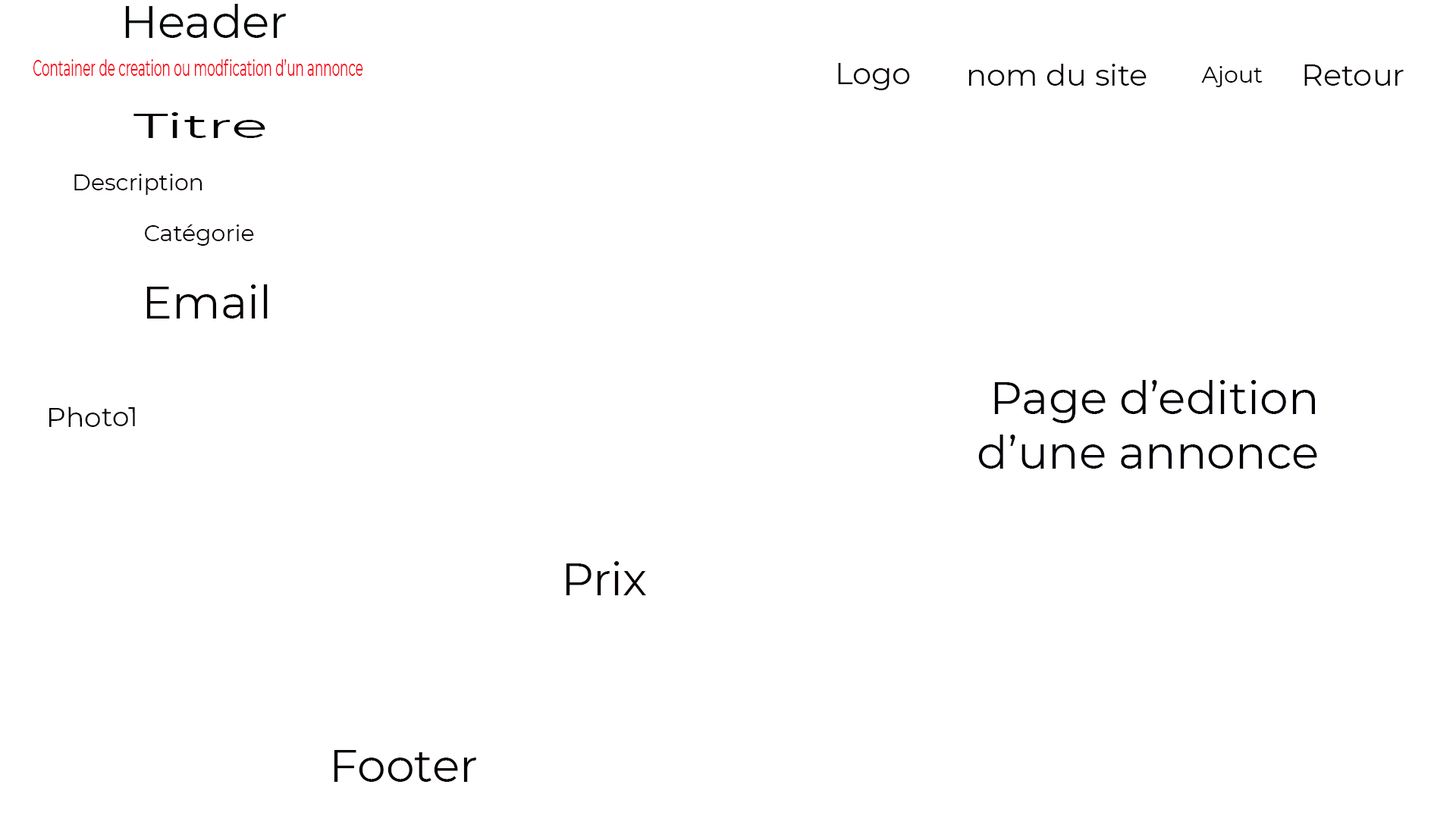
<style>
.page{position:relative;width:1456px;height:819px;background:#ffffff}
.page>*{position:absolute;margin:0}
.t1{font:45.5px "Montserrat-Regular";color:#000608}
.t2{font:22.7px "Montserrat-Regular";color:#f80718;scale:0.56 1}
.t3{font:30.3px "Montserrat-Regular";color:#080002}
.t4{font:22.7px "Montserrat-Regular";color:#010008}
.t5{font:33.7px "Montserrat-Regular";color:#080002;scale:1.79 1}
.t6{font:22.7px "Montserrat-Regular";color:#080002}
.t7{font:45.5px "Montserrat-Regular";color:#080002}
.t8{font:45.5px "Montserrat-Regular";color:#010008}
.t9{font:27.3px "Montserrat-Regular";color:#080002}
</style>
<div class="page">
<p class="t1" style="left:125px;top:4px;width:161px;height:34px">Header</p>
<p class="t2" style="left:33px;top:59px;width:330px;height:17px">Container de creation ou modfication d’un annonce</p>
<p class="t3" style="left:838px;top:63px;width:72px;height:27px">Logo</p>
<p class="t3" style="left:969px;top:64px;width:178px;height:22px">nom du site</p>
<p class="t4" style="left:1201px;top:66px;width:62px;height:21px">Ajout</p>
<p class="t3" style="left:1304px;top:64px;width:100px;height:22px">Retour</p>
<p class="t5" style="left:133px;top:112px;width:132px;height:26px">Titre</p>
<p class="t6" style="left:74px;top:174px;width:128px;height:21px">Description</p>
<p class="t6" style="left:145px;top:224px;width:109px;height:22px">Catégorie</p>
<p class="t7" style="left:146px;top:284px;width:122px;height:34px">Email</p>
<p class="t8" style="left:978px;top:380px;width:339px;height:89px;text-align:right">Page d’edition <br>d’une annonce</p>
<p class="t9" style="left:49px;top:406px;width:86px;height:21px">Photo1</p>
<p class="t7" style="left:566px;top:561px;width:80px;height:34px">Prix</p>
<p class="t7" style="left:334px;top:750px;width:142px;height:32px">Footer</p>
</div>
